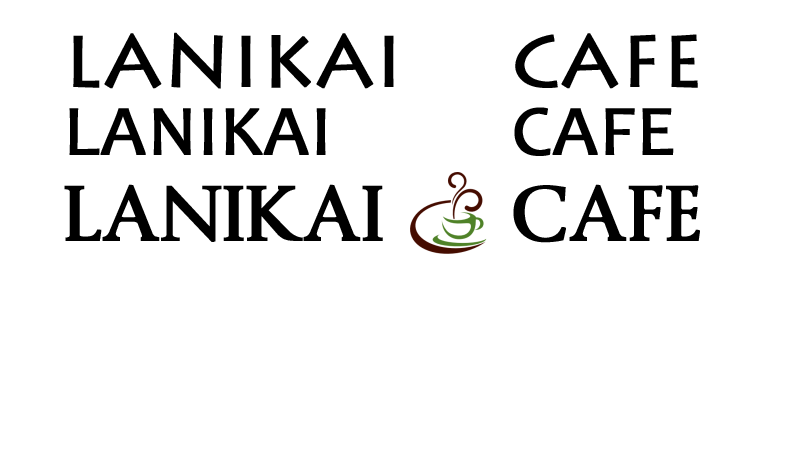
<style>
.page{position:relative;width:800px;height:450px;background:#ffffff}
.page>*{position:absolute;margin:0}
.t1{font:72px "LithosPro-Regular";color:#000000;font-weight:bold}
.t2{font:72px "Candara";color:#000000;font-weight:bold}
.t3{font:72px "Byington";color:#000000;font-weight:bold}
</style>
<div class="page">
<p class="t1" style="left:73px;top:32px;width:321px;height:57px">LANIKAI</p>
<p class="t1" style="left:515px;top:33px;width:183px;height:56px">CAFE</p>
<p class="t2" style="left:69px;top:108px;width:257px;height:47px">LANIKAI</p>
<p class="t2" style="left:514px;top:107px;width:160px;height:49px">CAFE</p>
<p class="t3" style="left:64px;top:184px;width:319px;height:58px">LANIKAI</p>
<p class="t3" style="left:513px;top:184px;width:187px;height:59px">CAFE</p>
</div>
